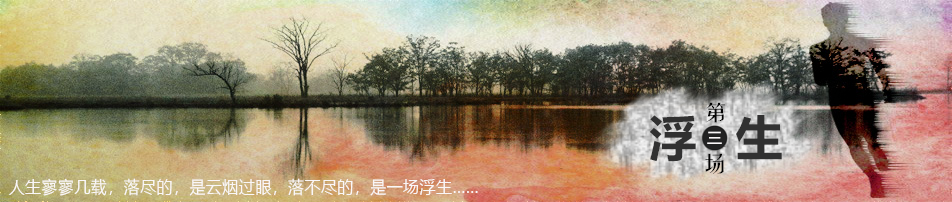
<style>
.page{position:relative;width:952px;height:202px}
.page>*{position:absolute;margin:0}
.t1{font:20.5px/25.7px "FZYTK--GBK1-0";letter-spacing:0.66em;color:#030303;scale:1.36 1}
.t2{font:20.5px/25.7px "FZYTK--GBK1-0";letter-spacing:0.66em;color:#030303;font-weight:bold;scale:1.36 1}
.t3{font:48.1px "MicrosoftYaHei-Bold";letter-spacing:0.8em;color:#313131}
.t4{font:15.3px "MicrosoftYaHei";letter-spacing:0.66em;color:#faf7f8}
.t5{font:17.1px "MicrosoftYaHei";letter-spacing:0.04em;color:#faf7f8;scale:0.93 1}
</style>
<div class="page">
<p class="t1" style="left:705px;top:102px;width:21px;height:72px;text-align:center">第<br><span class="t2">三<br></span>场</p>
<p class="t3" style="left:649px;top:115px;width:133px;height:47px">浮生</p>
<p class="t4" style="left:707px;top:131px;width:15px;height:13px">三</p>
<p class="t5" style="left:9px;top:178px;width:469px;height:18px">人生寥寥几载，落尽的，是云烟过眼，落不尽的，是一场浮生……</p>
</div>
